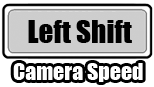
<style>
.page{position:relative;width:154px;height:87px;background:#ffffff}
.page>*{position:absolute;margin:0}
.t1{font:29.3px "Impact";color:#000000}
.t2{font:21.9px "Impact";color:#ffffff}
</style>
<div class="page">
<p class="t1" style="left:28px;top:20px;width:104px;height:23px">Left Shift</p>
<p class="t2" style="left:13px;top:63px;width:130px;height:19px">Camera Speed</p>
</div>
